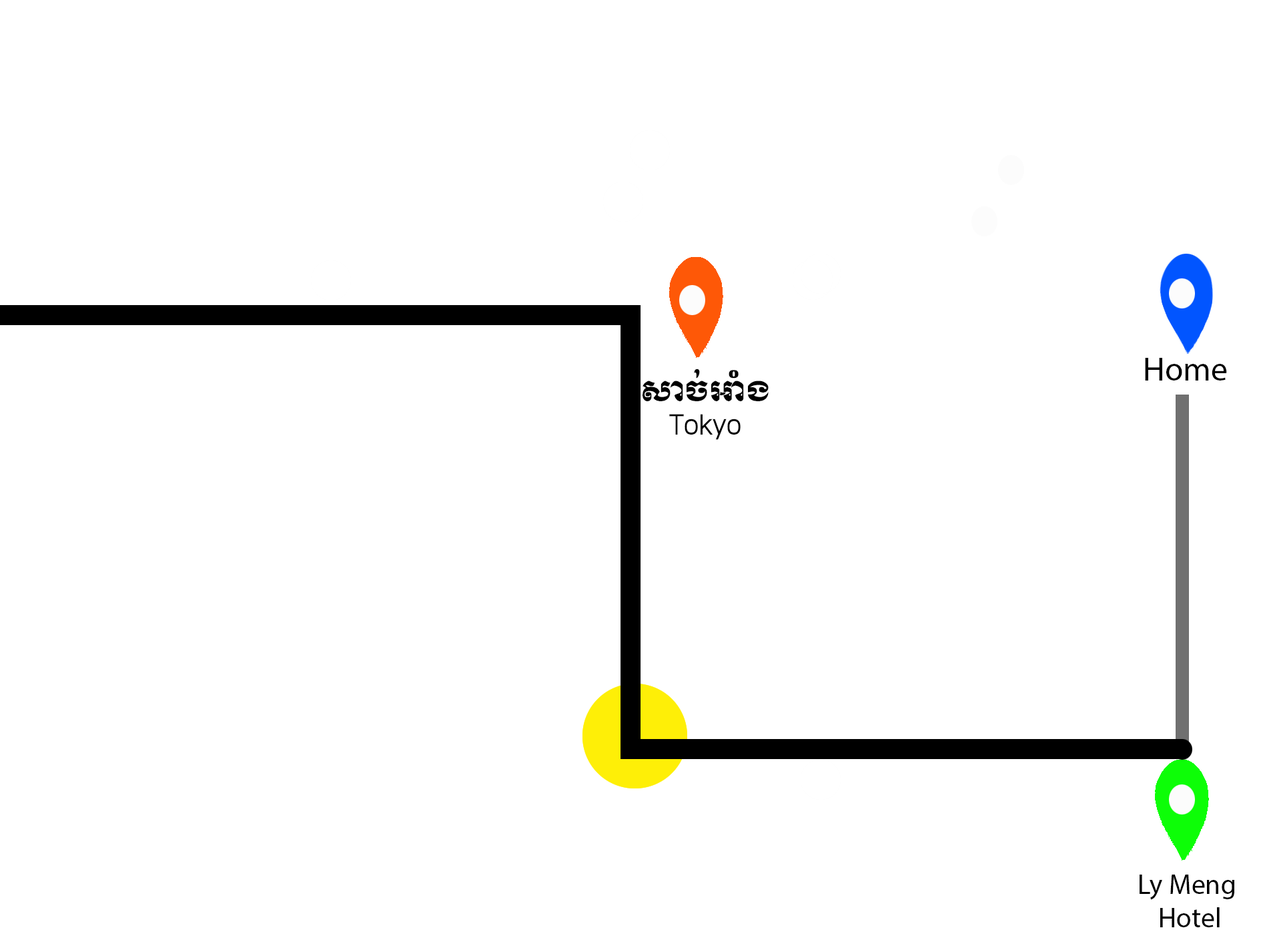
<style>
.page{position:relative;width:1261px;height:946px;background:#ffffff}
.page>*{position:absolute;margin:0}
.t1{font:33.4px "MyriadPro-Regular";color:#000000}
.t2{font:27.8px "Kh-Muol";color:#000000}
.t3{font:27.8px "MyriadPro-Regular";color:#000000}
</style>
<div class="page">
<p class="t1" style="left:1145px;top:358px;width:82px;height:22px">Home</p>
<p class="t2" style="left:643px;top:368px;width:126px;height:72px;text-align:center">សាច់អាំង<br>Tokyo</p>
<p class="t3" style="left:1140px;top:874px;width:95px;height:53px;text-align:center">Ly Meng <br>Hotel</p>
</div>
